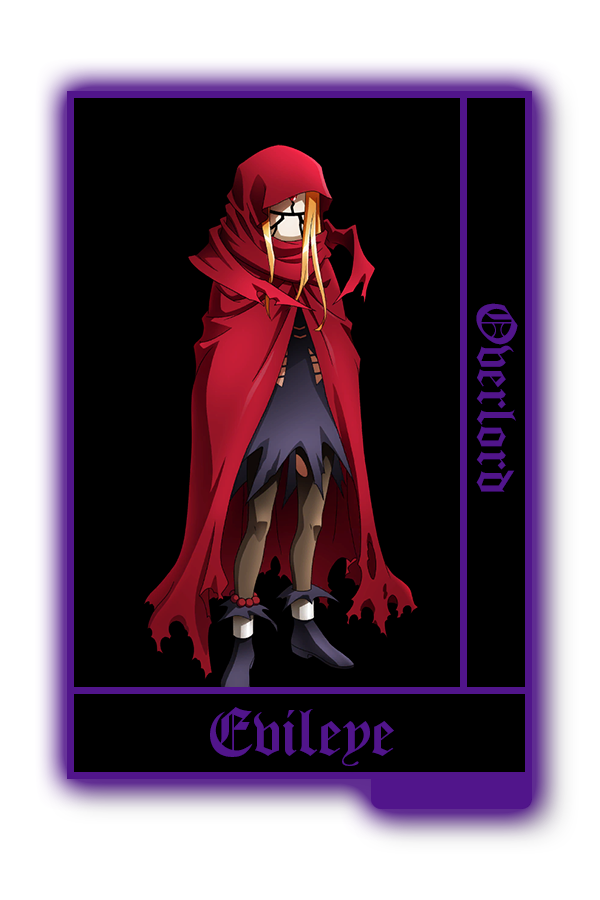
<style>
.page{position:relative;width:600px;height:900px;background:#000000}
.page>*{position:absolute;margin:0}
.t1{font:61.5px "OldLondon";color:#51158b}
.t2{font:75px "OldLondon";color:#51158b}
</style>
<div class="page">
<p class="t1" style="left:476px;top:303px;width:42px;height:189px;rotate:90deg">Overlord</p>
<p class="t2" style="left:210px;top:707px;width:184px;height:59px">Evileye</p>
</div>
